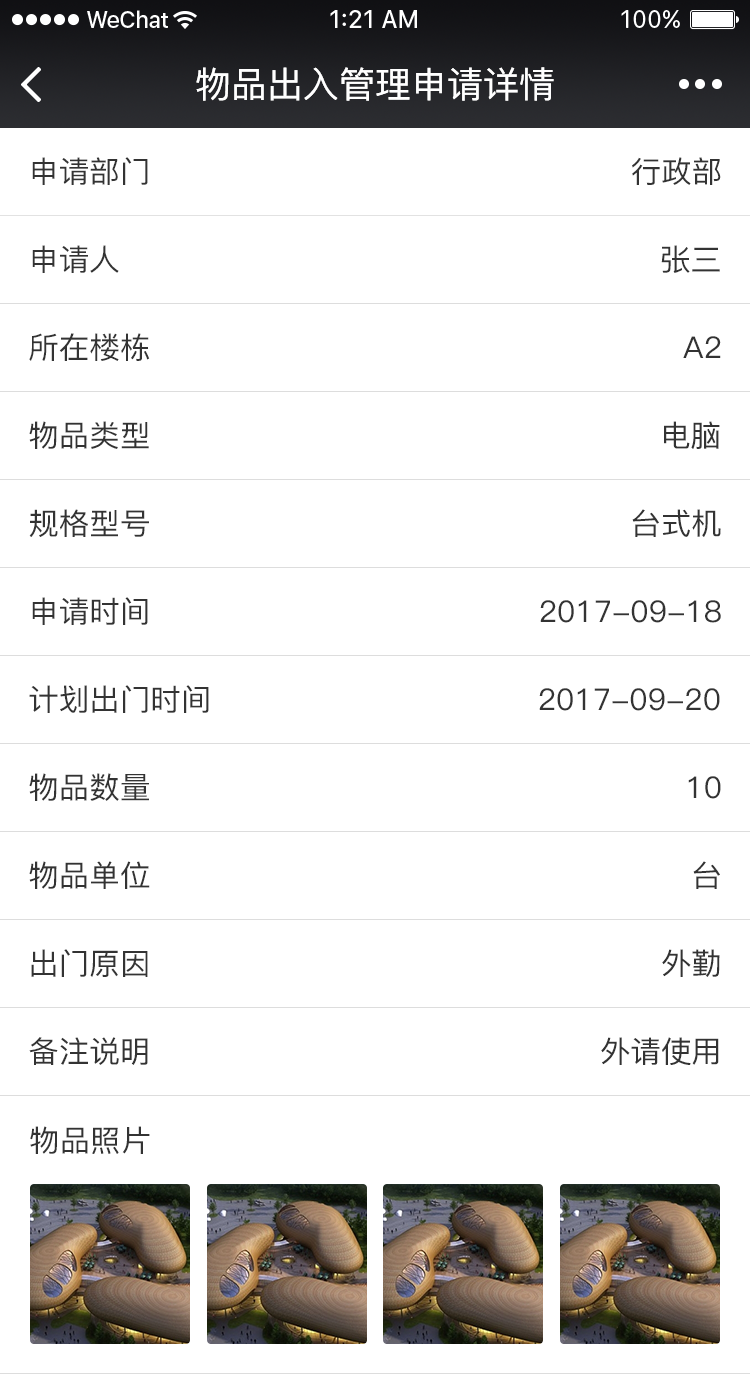
<style>
.page{position:relative;width:750px;height:1374px;background:#ffffff}
.page>*{position:absolute;margin:0}
.t1{font:36px "PingFang-SC-Medium";color:#ffffff}
.t2{font:30px "PingFang-SC-Medium";color:#333333}
.t3{font:29.9px "PingFang-SC-Medium";color:#333333}
</style>
<div class="page">
<p class="t1" style="left:196px;top:67px;width:358px;height:34px">物品出入管理申请详情</p>
<p class="t2" style="left:32px;top:157px;width:116px;height:28px">申请部门</p>
<p class="t2" style="left:632px;top:157px;width:89px;height:28px">行政部</p>
<p class="t2" style="left:32px;top:245px;width:87px;height:28px">申请人</p>
<p class="t2" style="left:661px;top:245px;width:59px;height:28px">张三</p>
<p class="t2" style="left:29px;top:333px;width:121px;height:28px">所在楼栋</p>
<p class="t2" style="left:683px;top:336px;width:38px;height:22px">A2</p>
<p class="t2" style="left:29px;top:421px;width:120px;height:28px">物品类型</p>
<p class="t2" style="left:664px;top:421px;width:56px;height:28px">电脑</p>
<p class="t2" style="left:29px;top:509px;width:120px;height:28px">规格型号</p>
<p class="t2" style="left:632px;top:509px;width:89px;height:28px">台式机</p>
<p class="t2" style="left:32px;top:597px;width:116px;height:28px">申请时间</p>
<p class="t2" style="left:540px;top:600px;width:181px;height:23px">2017-09-18</p>
<p class="t2" style="left:29px;top:685px;width:180px;height:28px">计划出门时间</p>
<p class="t2" style="left:539px;top:688px;width:181px;height:23px">2017-09-20</p>
<p class="t2" style="left:29px;top:773px;width:120px;height:28px">物品数量</p>
<p class="t2" style="left:688px;top:776px;width:33px;height:23px">10</p>
<p class="t2" style="left:29px;top:861px;width:121px;height:28px">物品单位</p>
<p class="t2" style="left:693px;top:861px;width:27px;height:28px">台</p>
<p class="t2" style="left:31px;top:949px;width:117px;height:28px">出门原因</p>
<p class="t2" style="left:662px;top:949px;width:58px;height:28px">外勤</p>
<p class="t2" style="left:29px;top:1037px;width:119px;height:28px">备注说明</p>
<p class="t2" style="left:601px;top:1037px;width:118px;height:28px">外请使用</p>
<p class="t3" style="left:30px;top:1126px;width:120px;height:28px">物品照片</p>
</div>
